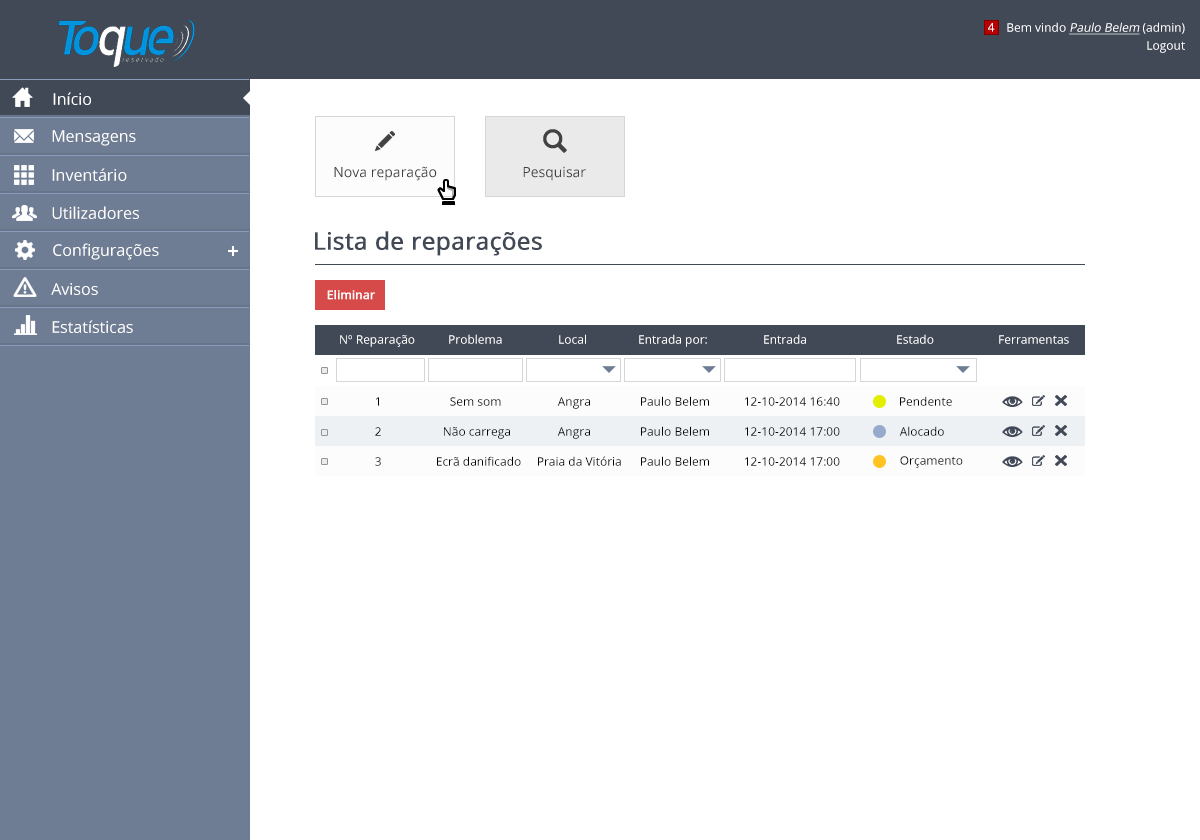
<style>
.page{position:relative;width:1200px;height:840px;background:#ffffff}
.page>*{position:absolute;margin:0}
.t1{font:12px "OpenSans";color:#ffffff}
.t2{font:12px "OpenSans";color:#ffffff;font-style:italic;text-decoration:underline}
.t3{font:16px "OpenSans";color:#ffffff}
.t4{font:14px "OpenSans";color:#424242}
.t5{font:24px "OpenSans";color:#414957;font-weight:bold}
.t6{font:12px "OpenSans";color:#ffffff;font-weight:bold}
.t7{font:12px "OpenSans";color:#000000}
.t8{font:12px "OpenSans"}
</style>
<div class="page">
<p class="t1" style="left:988px;top:23px;width:7px;height:9px">4</p>
<p class="t2" style="left:1007px;top:22px;width:178px;height:13px"><span class="t1">Bem vindo </span>Paulo Belem<span class="t1"> (admin)</span></p>
<p class="t1" style="left:1147px;top:41px;width:38px;height:12px">Logout</p>
<p class="t3" style="left:53px;top:92px;width:38px;height:13px">Início</p>
<p class="t3" style="left:52px;top:130px;width:84px;height:16px">Mensagens</p>
<p class="t3" style="left:52px;top:168px;width:75px;height:13px">Inventário</p>
<p class="t4" style="left:334px;top:166px;width:103px;height:15px">Nova reparação</p>
<p class="t4" style="left:523px;top:166px;width:63px;height:15px">Pesquisar</p>
<p class="t3" style="left:52px;top:206px;width:87px;height:13px">Utilizadores</p>
<p class="t5" style="left:315px;top:231px;width:227px;height:25px">Lista de reparações</p>
<p class="t3" style="left:53px;top:243px;width:106px;height:17px">Configurações</p>
<p class="t3" style="left:51px;top:283px;width:47px;height:12px">Avisos</p>
<p class="t6" style="left:327px;top:290px;width:48px;height:10px">Eliminar</p>
<p class="t3" style="left:52px;top:320px;width:81px;height:13px">Estatísticas</p>
<p class="t1" style="left:340px;top:335px;width:75px;height:12px">Nº Reparação</p>
<p class="t1" style="left:449px;top:334px;width:53px;height:10px">Problema</p>
<p class="t1" style="left:559px;top:334px;width:27px;height:10px">Local</p>
<p class="t1" style="left:639px;top:334px;width:68px;height:13px">Entrada por:</p>
<p class="t1" style="left:764px;top:334px;width:42px;height:10px">Entrada</p>
<p class="t1" style="left:897px;top:334px;width:37px;height:10px">Estado</p>
<p class="t1" style="left:999px;top:335px;width:70px;height:9px">Ferramentas</p>
<p class="t7" style="left:376px;top:397px;width:3px;height:9px">1</p>
<p class="t7" style="left:450px;top:397px;width:51px;height:9px">Sem som</p>
<p class="t7" style="left:557px;top:397px;width:33px;height:12px">Angra</p>
<p class="t7" style="left:641px;top:396px;width:68px;height:10px">Paulo Belem</p>
<p class="t7" style="left:745px;top:397px;width:95px;height:9px">12-10-2014 16:40</p>
<p class="t7" style="left:900px;top:396px;width:52px;height:10px">Pendente</p>
<p class="t8" style="left:375px;top:427px;width:6px;height:9px">2</p>
<p class="t7" style="left:444px;top:427px;width:66px;height:12px">Não carrega</p>
<p class="t7" style="left:557px;top:427px;width:33px;height:12px">Angra</p>
<p class="t7" style="left:641px;top:426px;width:68px;height:10px">Paulo Belem</p>
<p class="t7" style="left:745px;top:427px;width:95px;height:9px">12-10-2014 17:00</p>
<p class="t7" style="left:899px;top:426px;width:45px;height:10px">Alocado</p>
<p class="t8" style="left:375px;top:457px;width:6px;height:9px">3</p>
<p class="t7" style="left:437px;top:456px;width:84px;height:10px">Ecrã danificado</p>
<p class="t7" style="left:538px;top:456px;width:83px;height:10px">Praia da Vitória</p>
<p class="t7" style="left:641px;top:456px;width:68px;height:10px">Paulo Belem</p>
<p class="t7" style="left:745px;top:457px;width:95px;height:9px">12-10-2014 17:00</p>
<p class="t7" style="left:900px;top:456px;width:63px;height:12px">Orçamento</p>
</div>
